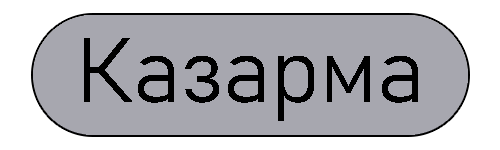
<style>
.page{position:relative;width:500px;height:150px;background:#a7a7af}
.page>*{position:absolute;margin:0}
.t1{font:90px "Bahnschrift-Bold";color:#000000}
</style>
<div class="page">
<p class="t1" style="left:84px;top:38px;width:334px;height:83px">Казарма</p>
</div>
